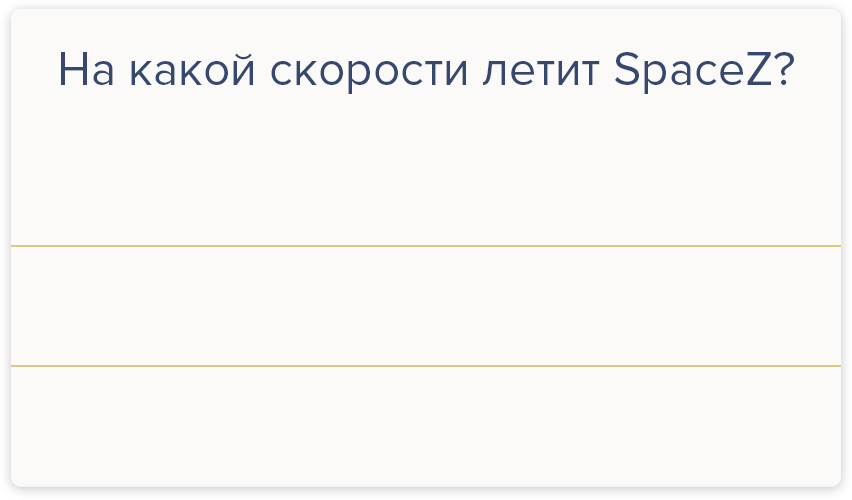
<style>
.page{position:relative;width:852px;height:500px;background:#fbfaf8}
.page>*{position:absolute;margin:0}
.t1{font:48px "ProximaNova-Regular";color:#344870}
</style>
<div class="page">
<p class="t1" style="left:61px;top:52px;width:733px;height:42px">На какой скорости летит SpaceZ?</p>
</div>
